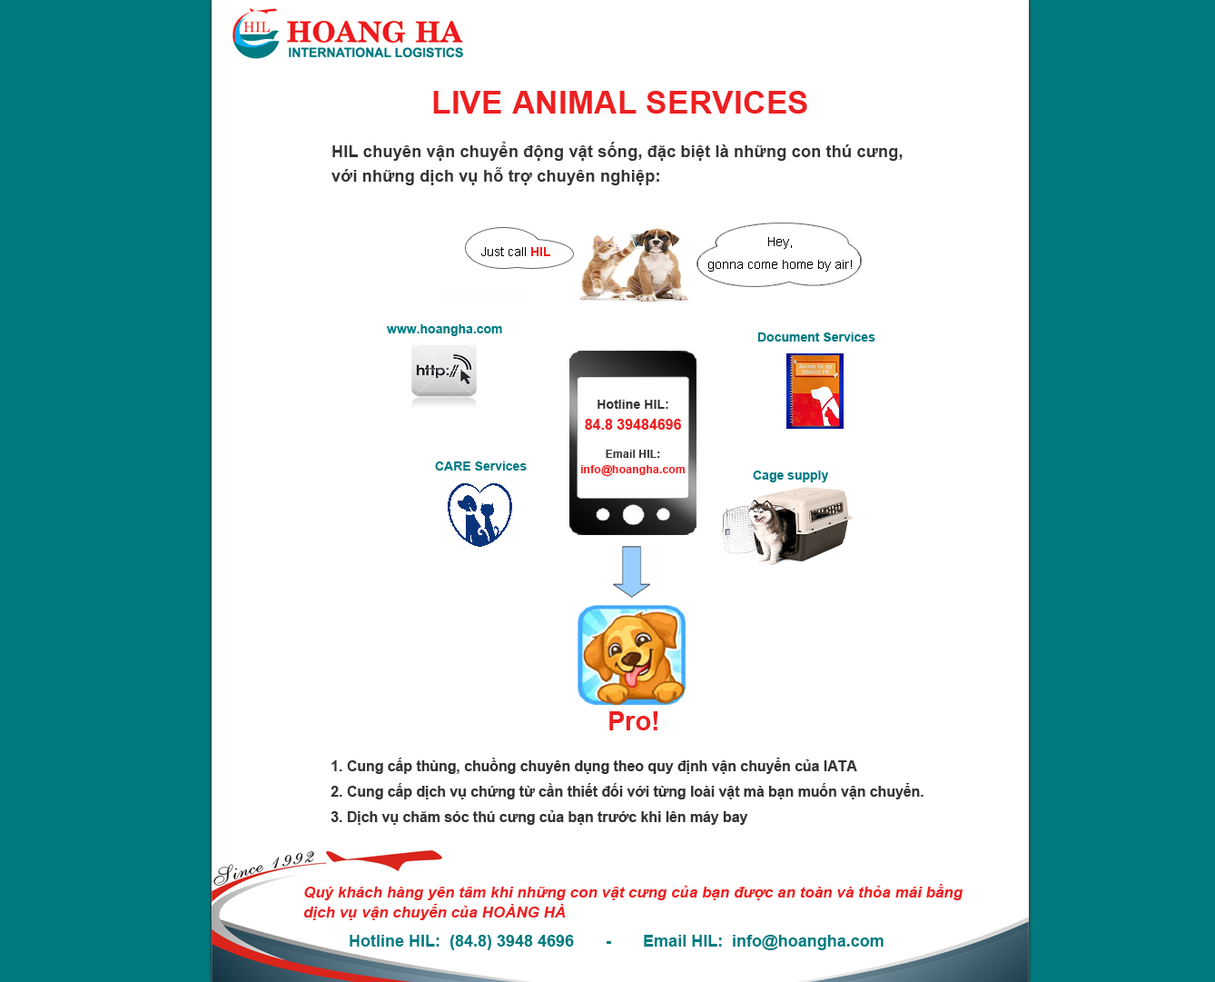
<style>
.page{position:relative;width:1215px;height:982px;background:#ffffff}
.page>*{position:absolute;margin:0}
.t1{font:32.2px "Arial-BoldMT";color:#ec2021}
.t2{font:16.8px/21.7px "Arial-BoldMT";color:#333333}
.t3{font:12.7px/20px "ArialMT";color:#000000}
.t4{font:12.7px "ArialMT";color:#000000}
.t5{font:12.7px "Arial-BoldMT";color:#ec2021}
.t6{font:12.7px "Arial-BoldMT";color:#007b83}
.t7{font:14.5px/17.8px "Arial-BoldMT";color:#ec2021}
.t8{font:12.9px/17.8px "Arial-BoldMT";color:#333333}
.t9{font:11.3px/13.8px "Arial-BoldMT";color:#ec2021}
.t10{font:11.3px/13.8px "Arial-BoldMT";color:#333333}
.t11{font:26.2px "Arial-BoldMT";color:#ec2021}
.t12{font:14.4px/22.6px "Arial-BoldMT";color:#333333}
.t13{font:15.4px/20px "Arial-BoldItalicMT";color:#ec2021}
.t14{font:16.3px "Arial-BoldMT";color:#017b80}
</style>
<div class="page">
<p class="t1" style="left:433px;top:91px;width:374px;height:22px">LIVE ANIMAL SERVICES</p>
<p class="t2" style="left:331px;top:142px;width:572px;height:43px">HIL chuyên vận chuyển động vật sống, đặc biệt là những con thú cưng,<br>với những dịch vụ hỗ trợ chuyên nghiệp:</p>
<p class="t3" style="left:708px;top:237px;width:144px;height:34px;text-align:center">Hey,<br>gonna come home by air!</p>
<p class="t4" style="left:481px;top:247px;width:69px;height:9px">Just call <span class="t5">HIL</span></p>
<p class="t6" style="left:387px;top:324px;width:115px;height:12px">www.hoangha.com</p>
<p class="t6" style="left:757px;top:332px;width:118px;height:9px">Document Services</p>
<p class="t7" style="left:585px;top:400px;width:96px;height:29px;text-align:center"><span class="t8">Hotline HIL:<br></span>84.8 39484696</p>
<p class="t9" style="left:581px;top:449px;width:104px;height:28px;text-align:center"><span class="t10">Email HIL:<br></span>info@hoangha.com</p>
<p class="t6" style="left:435px;top:461px;width:92px;height:9px">CARE Services</p>
<p class="t6" style="left:753px;top:470px;width:75px;height:12px">Cage supply</p>
<p class="t11" style="left:609px;top:711px;width:48px;height:19px">Pro!</p>
<p class="t12" style="left:331px;top:757px;width:592px;height:67px">1. Cung cấp thùng, chuồng chuyên dụng theo quy định vận chuyển của IATA<br>2. Cung cấp dịch vụ chứng từ cần thiết đối với từng loài vật mà bạn muốn vận chuyển.<br>3. Dịch vụ chăm sóc thú cưng của bạn trước khi lên máy bay</p>
<p class="t13" style="left:303px;top:883px;width:659px;height:37px">Quý khách hàng yên tâm khi những con vật cưng của bạn được an toàn và thỏa mái bằng dịch vụ vận chuyển của HOÀNG HÀ</p>
<p class="t14" style="left:350px;top:934px;width:533px;height:16px">Hotline HIL:  (84.8) 3948 4696       -       Email HIL:  info@hoangha.com</p>
</div>
